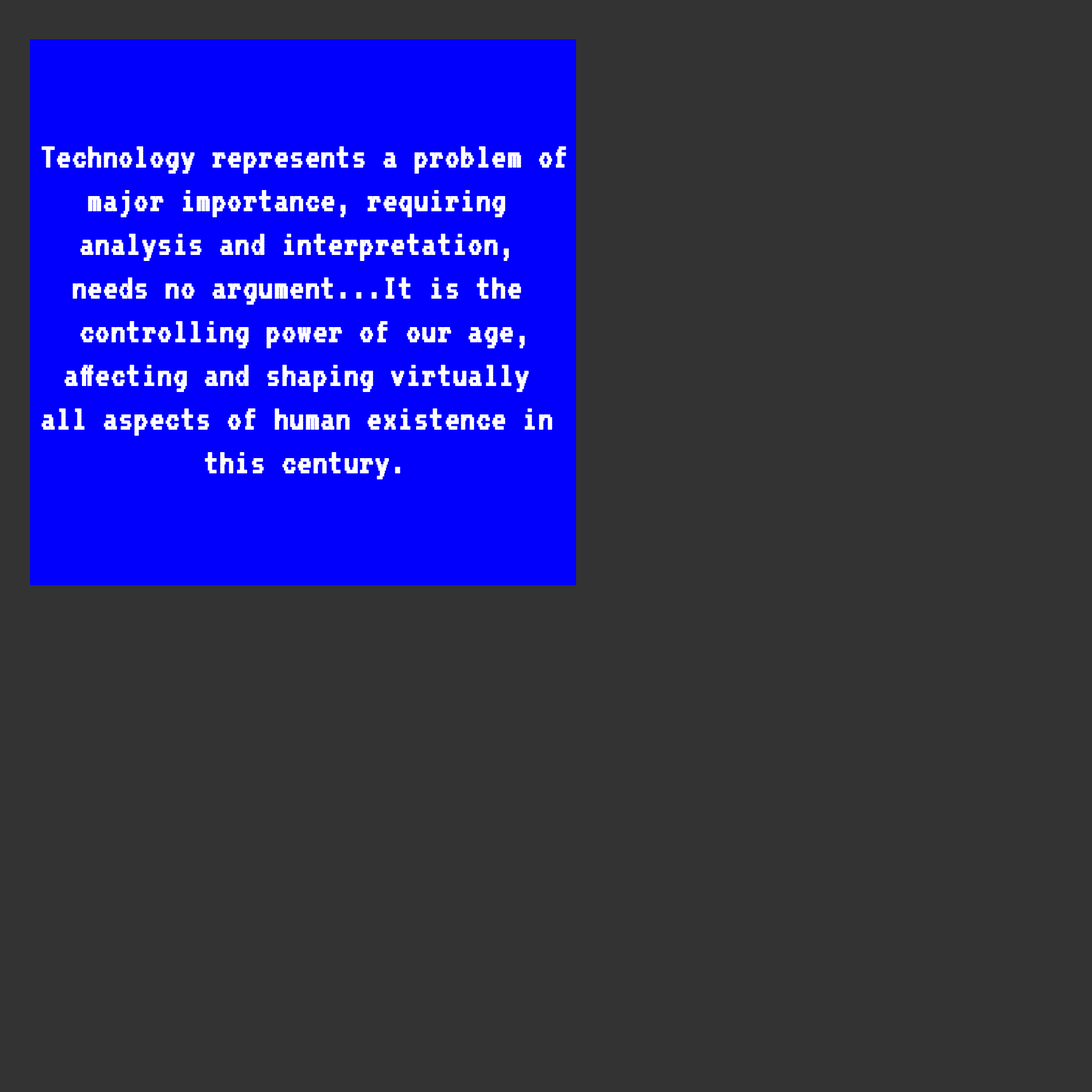
<style>
.page{position:relative;width:1092px;height:1092px;background:#333333}
.page>*{position:absolute;margin:0}
.t1{font:36.4px "VT323-Regular";color:#ffffff;font-weight:bold}
</style>
<div class="page">
<p class="t1" style="left:41px;top:146px;width:525px;height:333px;text-align:center">Technology represents a problem of<br>major importance, requiring <br>analysis and interpretation, <br>needs no argument...It is the <br>controlling power of our age,<br>affecting and shaping virtually <br>all aspects of human existence in <br>this century.</p>
</div>
